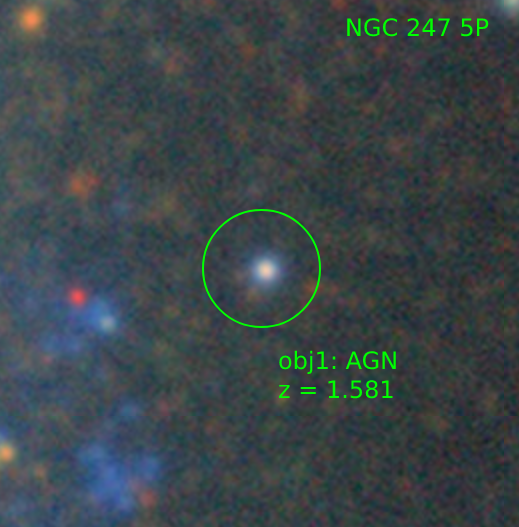
<style>
.page{position:relative;width:519px;height:527px}
.page>*{position:absolute;margin:0}
.t1{font:24px "DejaVuSans";color:#00ff00}
</style>
<div class="page">
<p class="t1" style="left:347px;top:18px;width:142px;height:19px">NGC 247 5P</p>
<p class="t1" style="left:279px;top:350px;width:117px;height:49px">obj1: AGN<br>z = 1.581</p>
</div>
